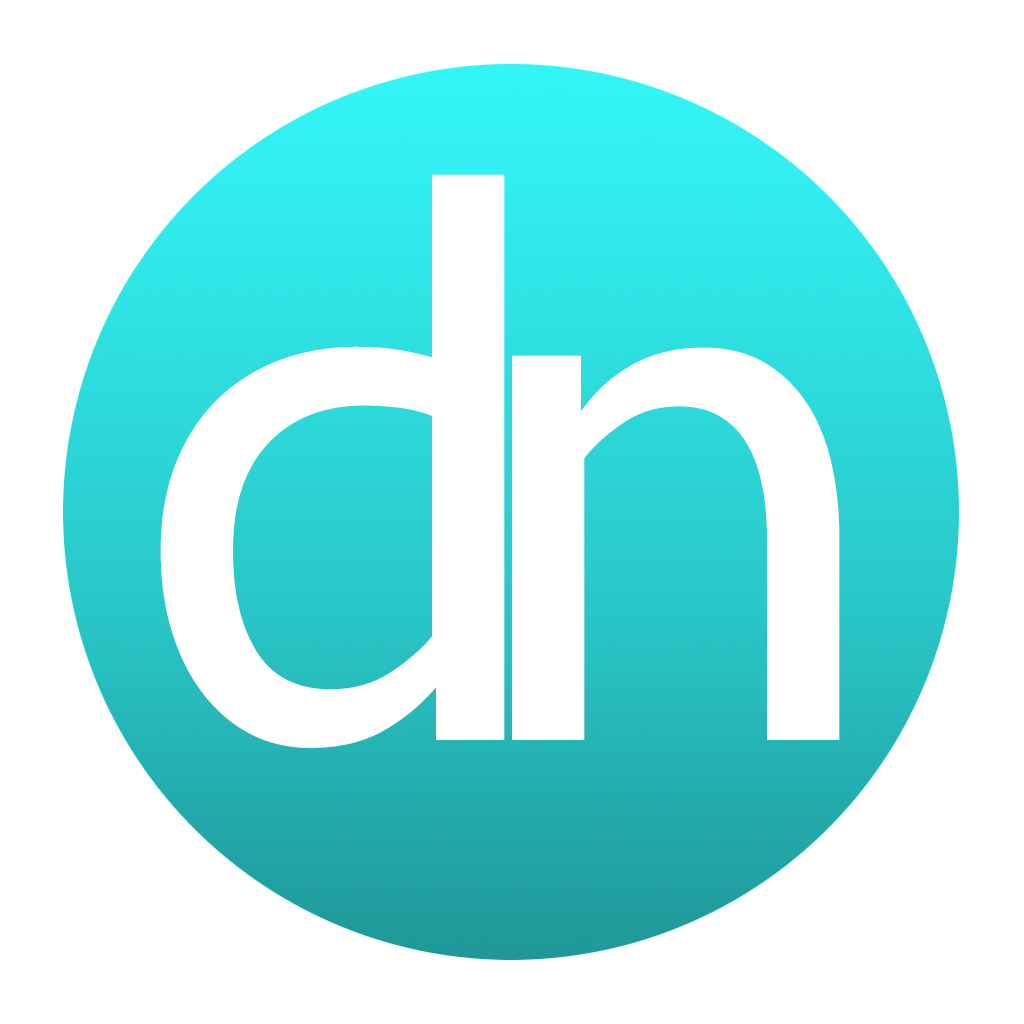
<style>
.page{position:relative;width:1024px;height:1024px;background:#ffffff}
.page>*{position:absolute;margin:0}
.t1{font:800px "Seravek";letter-spacing:-0.14em;color:#ffffff}
</style>
<div class="page">
<p class="t1" style="left:160px;top:174px;width:680px;height:574px">dn</p>
</div>
